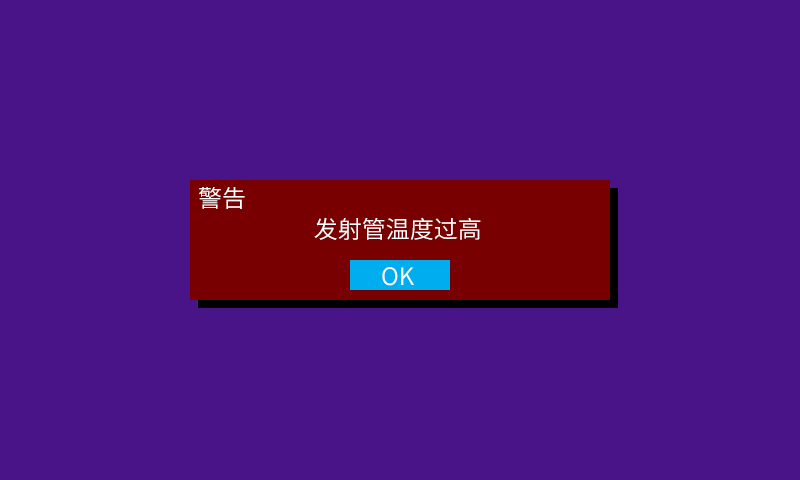
<style>
.page{position:relative;width:800px;height:480px;background:#481488}
.page>*{position:absolute;margin:0}
.t1{font:24px "SourceHanSansCN-Normal";color:#ffffff}
</style>
<div class="page">
<p class="t1" style="left:199px;top:187px;width:46px;height:22px">警告</p>
<p class="t1" style="left:314px;top:217px;width:167px;height:23px">发射管温度过高</p>
<p class="t1" style="left:382px;top:267px;width:32px;height:19px">OK</p>
</div>
